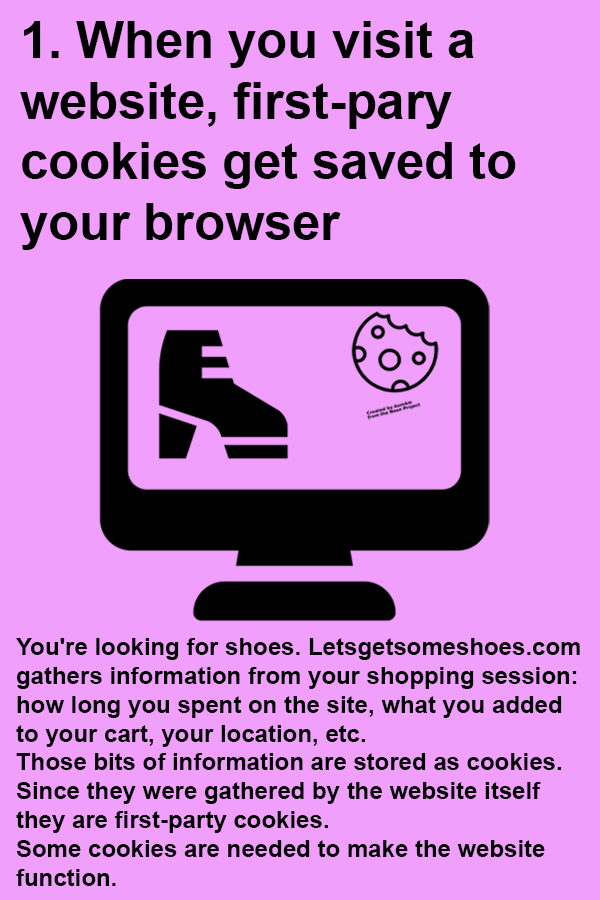
<style>
.page{position:relative;width:600px;height:900px;background:#f09ffc}
.page>*{position:absolute;margin:0}
.t1{font:50.5px "Arial-BoldMT";color:#000000}
.t2{font:24px "Arial-BoldMT";color:#000000}
</style>
<div class="page">
<p class="t1" style="left:20px;top:21px;width:496px;height:229px">1. When you visit a <br>website, first-pary <br>cookies get saved to <br>your browser</p>
<p class="t2" style="left:16px;top:638px;width:564px;height:248px">You're looking for shoes. Letsgetsomeshoes.com <br>gathers information from your shopping session: <br>how long you spent on the site, what you added <br>to your cart, your location, etc. <br>Those bits of information are stored as cookies. <br>Since they were gathered by the website itself <br>they are first-party cookies. <br>Some cookies are needed to make the website <br>function.</p>
</div>
